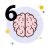
<style>
.page{position:relative;width:50px;height:50px;background:#ffffff}
.page>*{position:absolute;margin:0}
.t1{font:24px "MyriadHebrew-Bold";color:#000000}
</style>
<div class="page">
<p class="t1" style="left:5px;top:5px;width:12px;height:16px">6</p>
</div>
